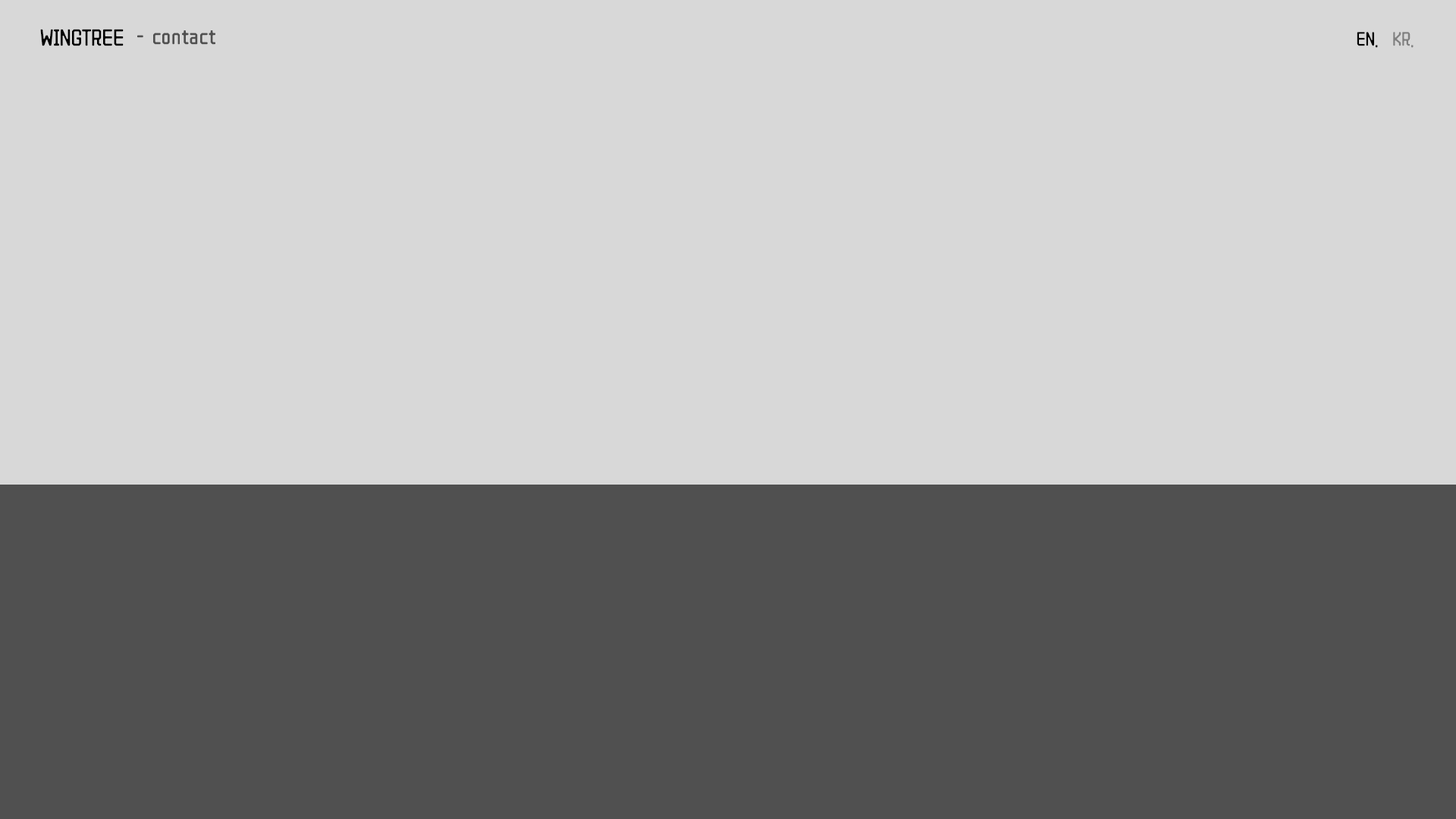
<style>
.page{position:relative;width:1456px;height:819px;background:#d8d8d8}
.page>*{position:absolute;margin:0}
.t1{font:22.7px "ZCOOLQingKeHuangYou-Regular";color:#000000}
.t2{font:22.7px "ZCOOLQingKeHuangYou-Regular";color:#505050}
.t3{font:19px "ZCOOLQingKeHuangYou-Regular";color:#000000}
.t4{font:19px "ZCOOLQingKeHuangYou-Regular";color:#808080}
</style>
<div class="page">
<p class="t1" style="left:40px;top:29px;width:84px;height:17px">WINGTREE</p>
<p class="t2" style="left:137px;top:30px;width:78px;height:15px">-  contact</p>
<p class="t3" style="left:1357px;top:32px;width:57px;height:16px">EN.    <span class="t4">KR.</span></p>
</div>
